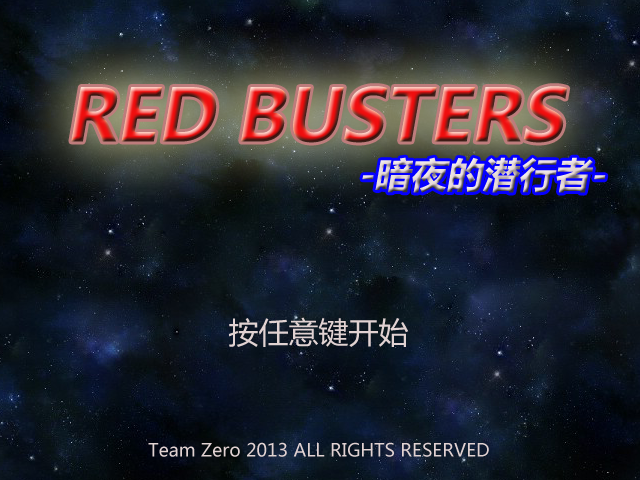
<style>
.page{position:relative;width:640px;height:480px}
.page>*{position:absolute;margin:0}
.t1{font:72px "MicrosoftYaHei";font-style:italic}
.t2{font:36px "MicrosoftYaHei";font-style:italic}
.t3{font:30px "MicrosoftYaHei";color:#e1d2d2}
.t4{font:18px "MicrosoftYaHei";color:#e1d2d2}
</style>
<div class="page">
<p class="t1" style="left:71px;top:86px;width:497px;height:57px">RED BUSTERS</p>
<p class="t2" style="left:362px;top:157px;width:244px;height:36px">-暗夜的潜行者-</p>
<p class="t3" style="left:229px;top:317px;width:180px;height:30px">按任意键开始</p>
<p class="t4" style="left:148px;top:442px;width:341px;height:15px">Team Zero 2013 ALL RIGHTS RESERVED</p>
</div>
